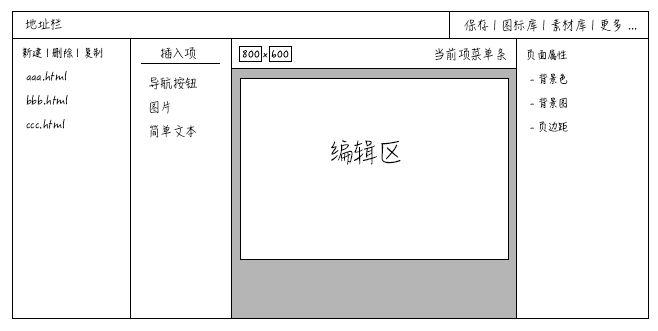
<style>
.page{position:relative;width:658px;height:331px;background:#ffffff}
.page>*{position:absolute;margin:0}
.t1{font:12px "HanziPenSC-W3";color:#000000}
.t2{font:10px "HanziPenSC-W3";color:#000000}
.t3{font:10px/24px "HanziPenSC-W3";color:#000000}
.t4{font:12px/24px "HanziPenSC-W3";color:#000000}
.t5{font:24px "HanziPenSC-W3";color:#000000}
</style>
<div class="page">
<p class="t1" style="left:25px;top:18px;width:37px;height:12px">地址栏</p>
<p class="t1" style="left:464px;top:18px;width:173px;height:14px">保存 | 图标库 | 素材库 | 更多 ...</p>
<p class="t2" style="left:22px;top:47px;width:81px;height:12px">新建 | 删除 | 复制</p>
<p class="t1" style="left:160px;top:47px;width:36px;height:13px">插入项</p>
<p class="t1" style="left:435px;top:47px;width:72px;height:14px">当前项菜单条</p>
<p class="t3" style="left:527px;top:49px;width:41px;height:83px">页面属性<br> - 背景色<br> - 背景图<br> - 页边距</p>
<p class="t4" style="left:26px;top:71px;width:42px;height:58px">aaa.html<br>bbb.html<br>ccc.html</p>
<p class="t4" style="left:149px;top:77px;width:48px;height:61px">导航按钮<br>图片<br>简单文本</p>
<p class="t5" style="left:331px;top:140px;width:70px;height:25px">编辑区</p>
</div>
